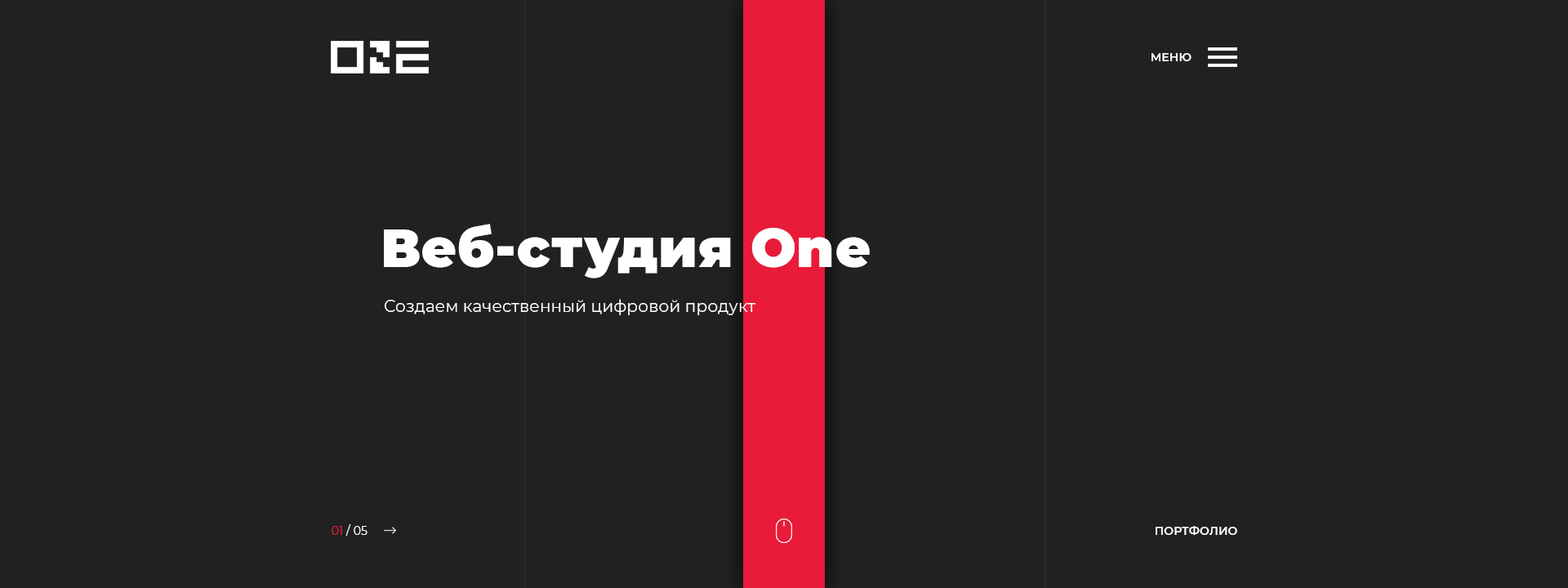
<style>
.page{position:relative;width:1568px;height:588px;background:#212121}
.page>*{position:absolute;margin:0}
.t1{font:11.4px "Montserrat-SemiBold";letter-spacing:0.01em;color:#ffffff}
.t2{font:53.9px "Montserrat-Black";letter-spacing:0.01em;color:#ffffff}
.t3{font:16.3px "Montserrat-Regular";letter-spacing:0.01em;color:#ffffff}
.t4{font:11.4px "Montserrat-Regular";letter-spacing:0.01em;color:#ffffff}
.t5{font:11.4px "Montserrat-Regular";letter-spacing:0.01em;color:#e91b38}
</style>
<div class="page">
<p class="t1" style="left:1152px;top:53px;width:40px;height:8px">МЕНЮ</p>
<p class="t2" style="left:384px;top:224px;width:486px;height:54px">Веб-студия One</p>
<p class="t3" style="left:385px;top:299px;width:370px;height:16px">Создаем качественный цифровой продукт</p>
<p class="t4" style="left:332px;top:524px;width:36px;height:12px"><span class="t5">01</span> / 05</p>
<p class="t1" style="left:1156px;top:526px;width:81px;height:9px">ПОРТФОЛИО</p>
</div>
